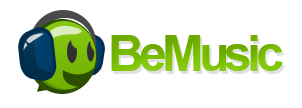
<style>
.page{position:relative;width:302px;height:108px;background:#ffffff}
.page>*{position:absolute;margin:0}
.t1{font:50px "Arial-BoldMT";letter-spacing:-0.1em;color:#7dc400}
</style>
<div class="page">
<p class="t1" style="left:111px;top:35px;width:172px;height:36px">BeMusic</p>
</div>
